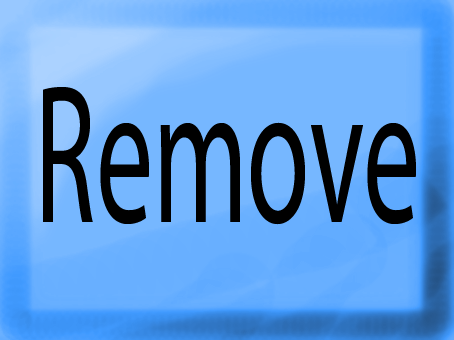
<style>
.page{position:relative;width:454px;height:340px;background:#76b7ff}
.page>*{position:absolute;margin:0}
.t1{font:199.5px "MyriadPro-Regular";color:#000000;scale:0.57 1}
</style>
<div class="page">
<p class="t1" style="left:43px;top:87px;width:373px;height:138px">Remove</p>
</div>
